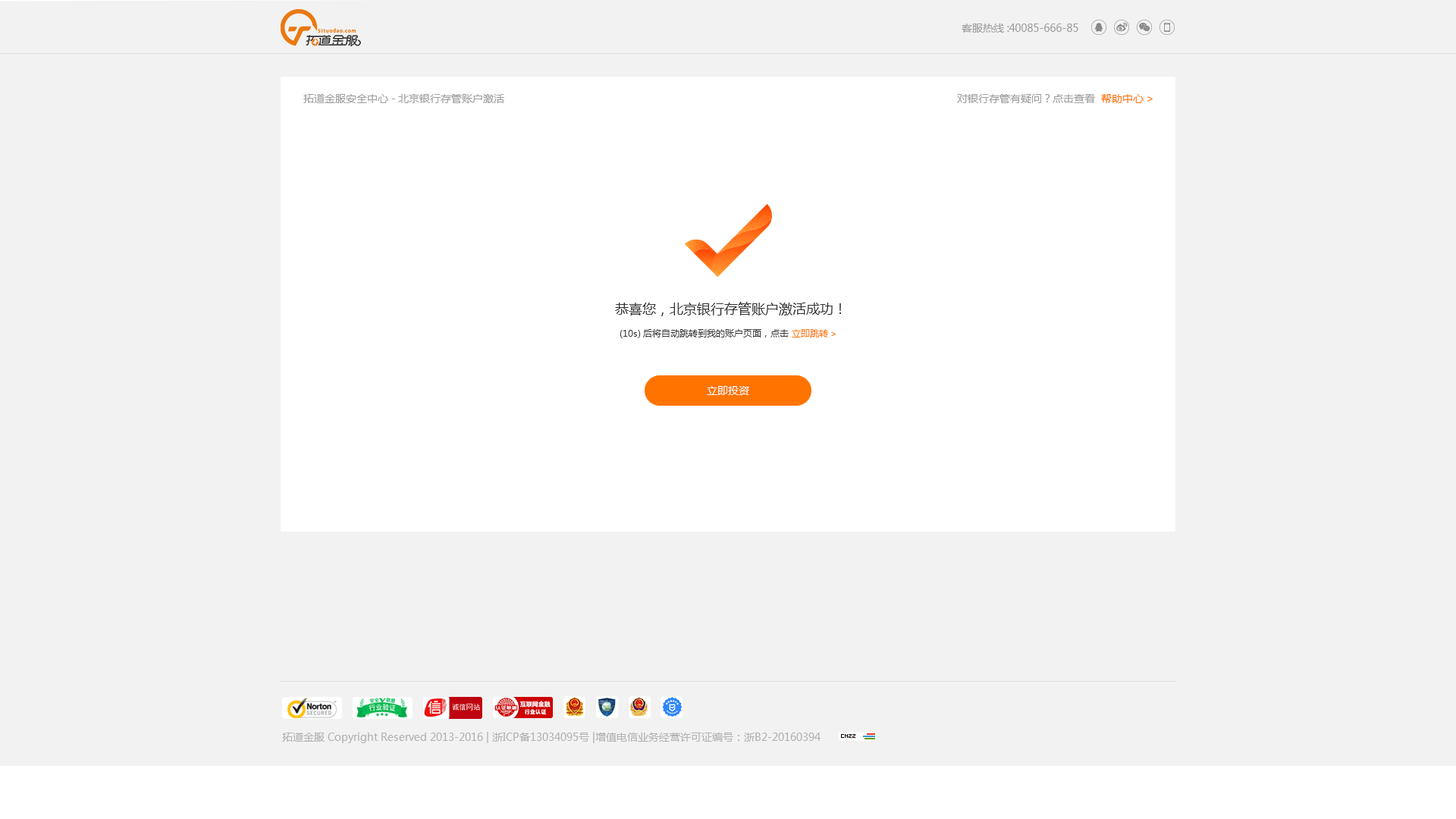
<style>
.page{position:relative;width:1456px;height:819px;background:#f2f2f2}
.page>*{position:absolute;margin:0}
.t1{font:10.6px "MicrosoftYaHei";color:#9e9e9e}
.t2{font:10.6px "MicrosoftYaHei";color:#ff7400}
.t3{font:13.6px "MicrosoftYaHei";color:#333333}
.t4{font:9.1px "MicrosoftYaHei";color:#333333}
.t5{font:9.1px "MicrosoftYaHei";color:#ff7400}
.t6{font:10.6px "MicrosoftYaHei";color:#fefefe}
</style>
<div class="page">
<p class="t1" style="left:962px;top:24px;width:116px;height:9px">客服热线:40085-666-85</p>
<p class="t1" style="left:303px;top:94px;width:201px;height:9px">拓道金服安全中心-北京银行存管账户激活</p>
<p class="t1" style="left:957px;top:94px;width:196px;height:9px">对银行存管有疑问？点击查看  <span class="t2">帮助中心&gt;</span></p>
<p class="t3" style="left:615px;top:302px;width:226px;height:14px">恭喜您，北京银行存管账户激活成功！</p>
<p class="t4" style="left:620px;top:329px;width:216px;height:9px">(10s)后将自动跳转到我的账户页面，点击 <span class="t5">立即跳转&gt;</span></p>
<p class="t6" style="left:707px;top:386px;width:42px;height:9px">立即投资</p>
<p class="t1" style="left:282px;top:732px;width:539px;height:11px;opacity:0.8">拓道金服 Copyright Reserved 2013-2016 | 浙ICP备13034095号 |增值电信业务经营许可证编号：浙B2-20160394</p>
</div>
